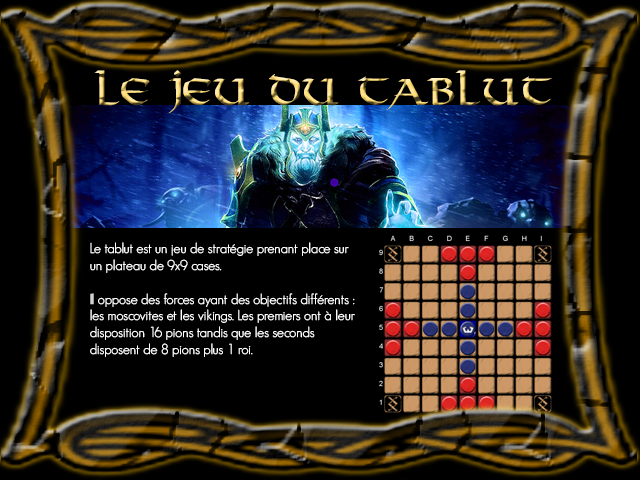
<style>
.page{position:relative;width:640px;height:480px;background:#000000}
.page>*{position:absolute;margin:0}
.t1{font:36px "Viking-Normal"}
.t2{font:14px "GeosansLight";color:#ffffff}
</style>
<div class="page">
<p class="t1" style="left:94px;top:70px;width:458px;height:43px">Le jeu du Tablut</p>
<p class="t2" style="left:90px;top:242px;width:265px;height:115px">Le tablut est un jeu de stratégie prenant place sur un plateau de 9x9 cases. <br><br>Il oppose des forces ayant des objectifs différents : les moscovites et les vikings. Les premiers ont à leur disposition 16 pions tandis que les seconds disposent de 8 pions plus 1 roi.</p>
</div>
